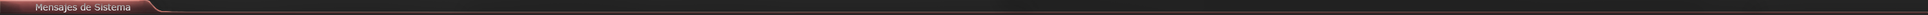
<style>
.page{position:relative;width:1928px;height:15px}
.page>*{position:absolute;margin:0}
.t1{font:9px "Verdana"}
</style>
<div class="page">
<p class="t1" style="left:36px;top:3px;width:94px;height:9px">Mensajes de Sistema</p>
</div>
